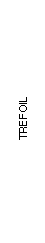
<style>
.page{position:relative;width:45px;height:243px;background:#ffffff}
.page>*{position:absolute;margin:0}
.t1{font:11.2px "Dotum";color:#000000}
</style>
<div class="page">
<p class="t1" style="left:19px;top:97px;width:8px;height:43px;rotate:180deg">TREFOIL</p>
</div>
